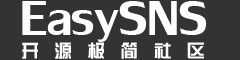
<style>
.page{position:relative;width:240px;height:60px;background:#333333}
.page>*{position:absolute;margin:0}
.t1{font:74px "LilyUPC";color:#fdfdfc}
.t2{font:18px "FZZYJW--GB1-0";letter-spacing:0.84em;color:#fdfdfc}
</style>
<div class="page">
<p class="t1" style="left:22px;top:1px;width:185px;height:41px">EasySNS</p>
<p class="t2" style="left:22px;top:42px;width:182px;height:17px">开源极简社区</p>
</div>
